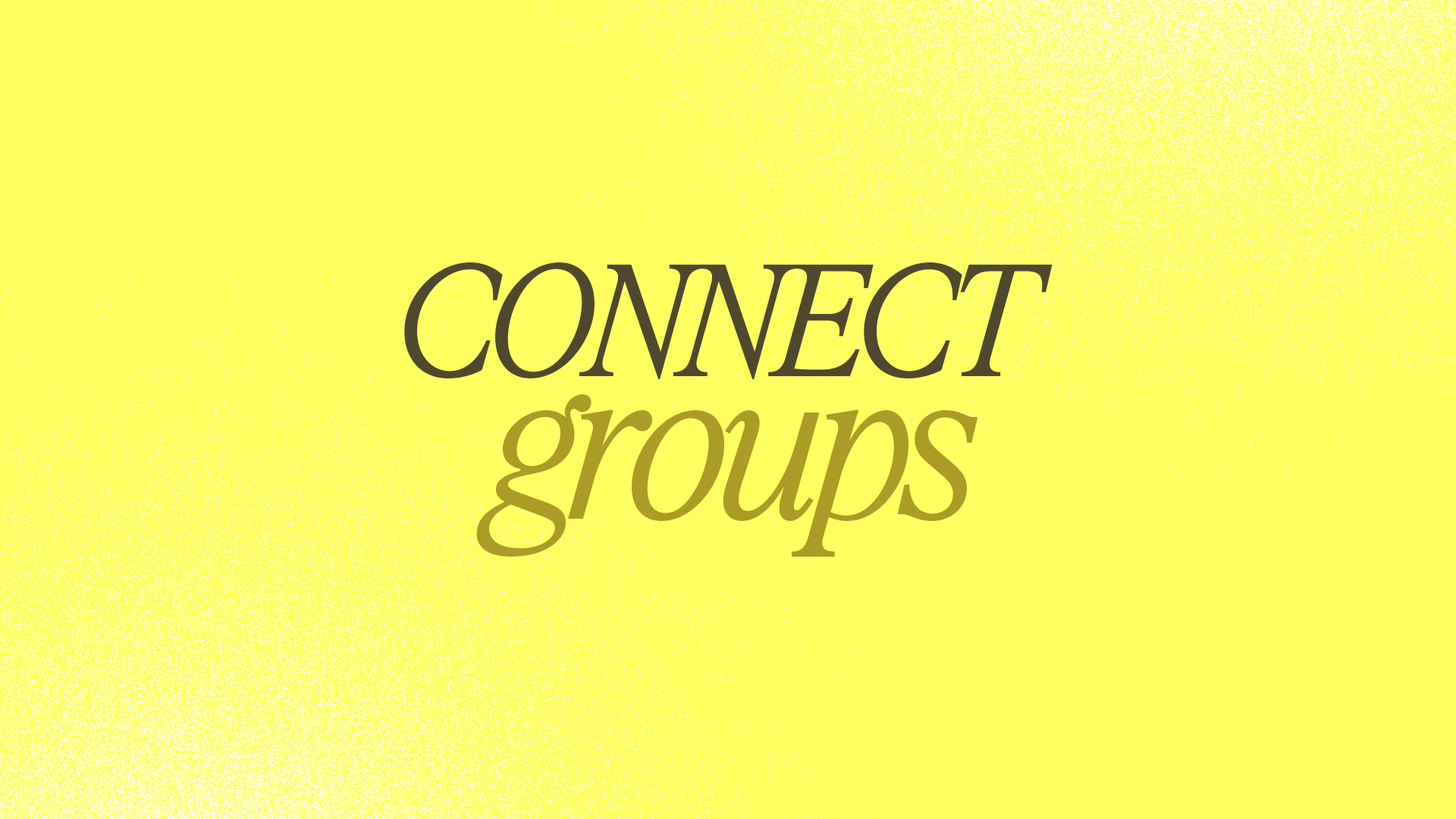
<style>
.page{position:relative;width:1456px;height:819px;background:#ffff5f}
.page>*{position:absolute;margin:0}
.t1{font:152.2px "RyhmesText-LightItalic";letter-spacing:-0.08em;color:#50482e}
.t2{font:209.7px "RyhmesText-LightItalic";letter-spacing:-0.08em;color:#ac9b25}
</style>
<div class="page">
<p class="t1" style="left:404px;top:262px;width:649px;height:117px">CONNECT</p>
<p class="t2" style="left:476px;top:394px;width:501px;height:163px">groups</p>
</div>
